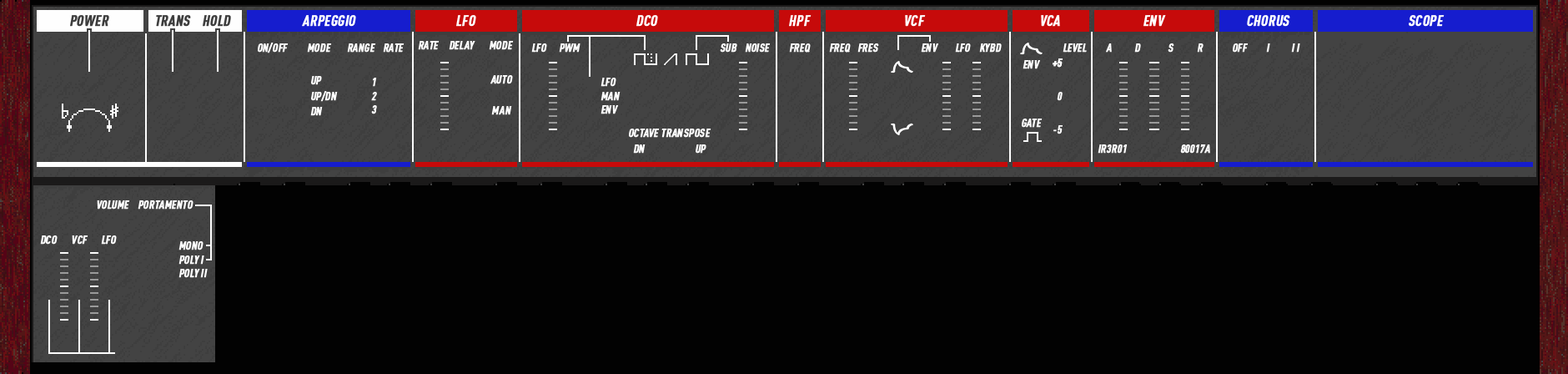
<style>
.page{position:relative;width:1568px;height:374px;background:#020202}
.page>*{position:absolute;margin:0}
.t1{font:14.6px "DINPro-CondensedBold";color:#3e3e3e;font-weight:bold;font-style:italic}
.t2{font:14.6px "DINPro-CondensedBold";color:#ffffff;font-weight:bold;font-style:italic}
.t3{font:11.4px "DINPro-CondensedBold";color:#fefefe;font-weight:bold;font-style:italic}
.t4{font:11.4px/15.4px "DINPro-CondensedBold";color:#fefefe;font-weight:bold;font-style:italic}
</style>
<div class="page">
<p class="t1" style="left:70px;top:15px;width:39px;height:12px">POWER</p>
<p class="t1" style="left:156px;top:15px;width:35px;height:12px">TRANS</p>
<p class="t1" style="left:203px;top:15px;width:28px;height:12px">HOLD</p>
<p class="t2" style="left:302px;top:15px;width:54px;height:12px">ARPEGGIO</p>
<p class="t2" style="left:456px;top:15px;width:20px;height:12px">LFO</p>
<p class="t2" style="left:636px;top:15px;width:22px;height:12px">DCO</p>
<p class="t2" style="left:789px;top:15px;width:23px;height:12px">HPF</p>
<p class="t2" style="left:905px;top:15px;width:21px;height:12px">VCF</p>
<p class="t2" style="left:1041px;top:15px;width:19px;height:12px">VCA</p>
<p class="t2" style="left:1143px;top:15px;width:23px;height:12px">ENV</p>
<p class="t2" style="left:1247px;top:15px;width:43px;height:12px">CHORUS</p>
<p class="t2" style="left:1409px;top:15px;width:36px;height:12px">SCOPE</p>
<p class="t3" style="left:418px;top:41px;width:22px;height:9px">RATE</p>
<p class="t3" style="left:449px;top:41px;width:26px;height:9px">DELAY</p>
<p class="t3" style="left:489px;top:41px;width:25px;height:9px">MODE</p>
<p class="t3" style="left:258px;top:43px;width:31px;height:10px">ON/OFF</p>
<p class="t3" style="left:307px;top:43px;width:25px;height:10px">MODE</p>
<p class="t3" style="left:347px;top:43px;width:29px;height:10px">RANGE</p>
<p class="t3" style="left:383px;top:43px;width:22px;height:10px">RATE</p>
<p class="t3" style="left:531px;top:43px;width:16px;height:10px">LFO</p>
<p class="t3" style="left:559px;top:43px;width:21px;height:10px">PWM</p>
<p class="t3" style="left:720px;top:43px;width:17px;height:10px">SUB</p>
<p class="t3" style="left:745px;top:43px;width:26px;height:10px">NOISE</p>
<p class="t3" style="left:789px;top:43px;width:22px;height:10px">FREQ</p>
<p class="t3" style="left:829px;top:43px;width:22px;height:10px">FREQ</p>
<p class="t3" style="left:857px;top:43px;width:22px;height:10px">FRES</p>
<p class="t3" style="left:921px;top:43px;width:17px;height:10px">ENV</p>
<p class="t3" style="left:955px;top:43px;width:16px;height:10px">LFO</p>
<p class="t3" style="left:979px;top:43px;width:23px;height:10px">KYBD</p>
<p class="t3" style="left:1063px;top:43px;width:24px;height:10px">LEVEL</p>
<p class="t3" style="left:1106px;top:43px;width:6px;height:10px">A</p>
<p class="t3" style="left:1134px;top:43px;width:7px;height:10px">D</p>
<p class="t3" style="left:1168px;top:43px;width:6px;height:10px">S</p>
<p class="t3" style="left:1197px;top:43px;width:7px;height:10px">R</p>
<p class="t3" style="left:1233px;top:43px;width:16px;height:10px">OFF</p>
<p class="t3" style="left:1266px;top:43px;width:4px;height:10px">I</p>
<p class="t3" style="left:1291px;top:43px;width:9px;height:10px">I I</p>
<p class="t3" style="left:1023px;top:60px;width:17px;height:9px">ENV</p>
<p class="t3" style="left:1053px;top:58px;width:10px;height:10px">+5</p>
<p class="t3" style="left:1053px;top:58px;width:10px;height:10px">+5</p>
<p class="t4" style="left:310px;top:76px;width:28px;height:40px"><span class="t3">U</span>P<br>UP/DN<br>DN</p>
<p class="t3" style="left:371px;top:78px;width:6px;height:36px">1<br>2<br>3</p>
<p class="t4" style="left:490px;top:75px;width:23px;height:40px;text-align:center">AUTO<br><br>MAN</p>
<p class="t3" style="left:601px;top:78px;width:20px;height:36px">LFO<br>MAN<br>ENV</p>
<p class="t3" style="left:1057px;top:92px;width:6px;height:9px">0</p>
<p class="t3" style="left:1022px;top:118px;width:21px;height:10px">GATE</p>
<p class="t3" style="left:1053px;top:125px;width:10px;height:9px">-5</p>
<p class="t3" style="left:629px;top:128px;width:82px;height:10px">OCTAVE TRANSPOSE</p>
<p class="t3" style="left:633px;top:144px;width:13px;height:9px">DN</p>
<p class="t3" style="left:696px;top:144px;width:10px;height:9px">UP</p>
<p class="t3" style="left:1098px;top:144px;width:30px;height:9px">IR3R01</p>
<p class="t3" style="left:1180px;top:144px;width:30px;height:9px">80017A</p>
<p class="t3" style="left:97px;top:200px;width:33px;height:9px">VOLUME</p>
<p class="t3" style="left:138px;top:200px;width:55px;height:9px">PORTAMENTO</p>
<p class="t3" style="left:40px;top:235px;width:18px;height:9px">DCO</p>
<p class="t3" style="left:72px;top:235px;width:16px;height:9px">VCF</p>
<p class="t3" style="left:101px;top:235px;width:16px;height:9px">LFO</p>
<p class="t3" style="left:178px;top:241px;width:30px;height:37px">MONO<br>POLY I <br>POLY II</p>
</div>
